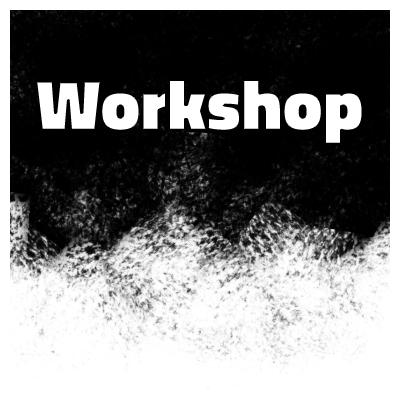
<style>
.page{position:relative;width:400px;height:400px;background:#ffffff}
.page>*{position:absolute;margin:0}
.t1{font:72px "TitilliumWeb-Black";color:#ffffff}
.t2{font:72px "TitilliumWeb-Black";scale:0.96 1}
</style>
<div class="page">
<p class="t1" style="left:36px;top:80px;width:327px;height:64px">Workshop</p>
<p class="t2" style="left:48px;top:81px;width:305px;height:71px;rotate:2deg">workshop</p>
</div>
